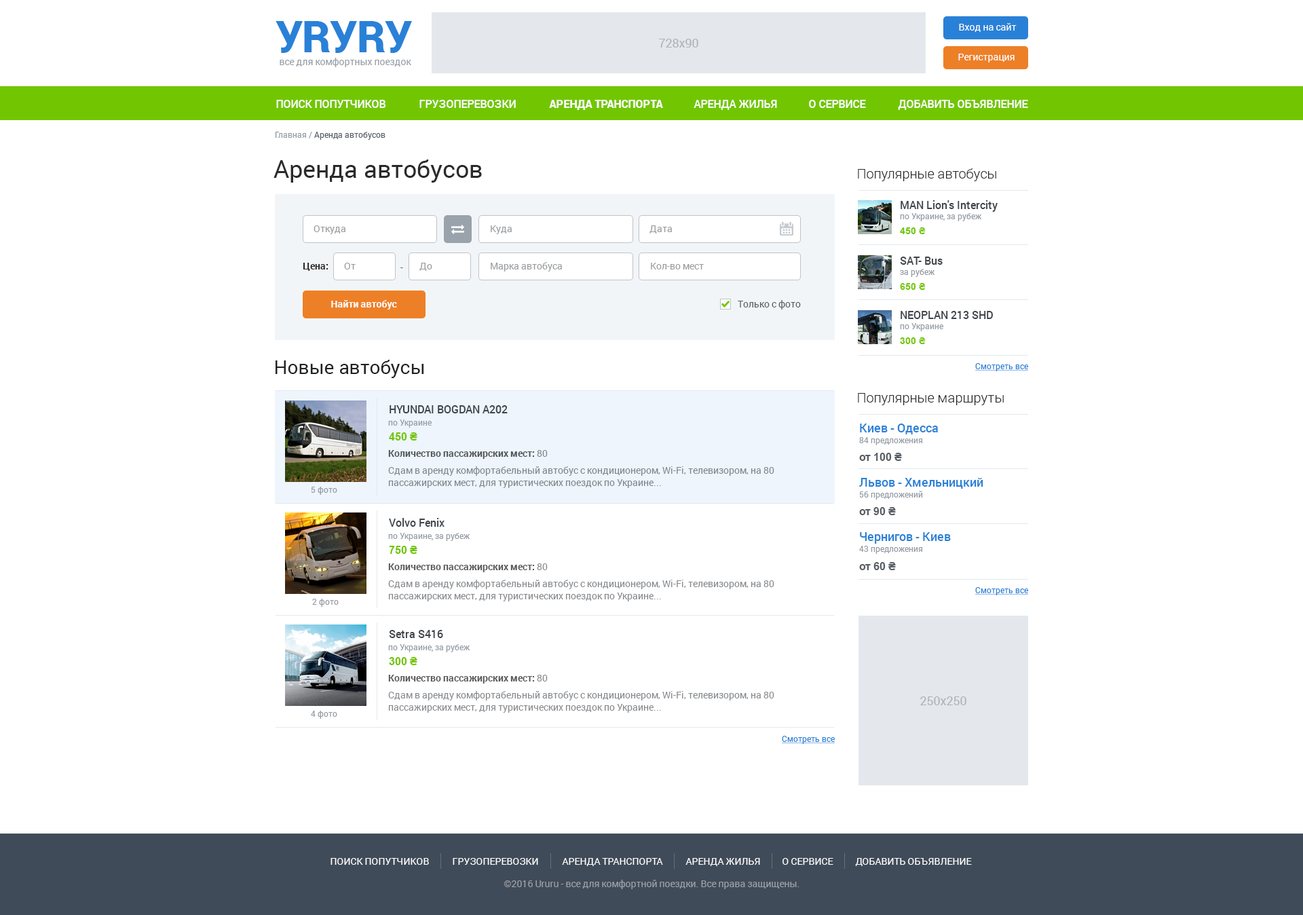
<style>
.page{position:relative;width:1303px;height:915px;background:#ffffff}
.page>*{position:absolute;margin:0}
.t1{font:43.4px "Roboto-Black";letter-spacing:-0.01em;color:#2981d7}
.t2{font:9.5px "Roboto-Regular";color:#ffffff}
.t3{font:12.2px "Roboto-Regular";color:#acb2b8}
.t4{font:9.5px "Roboto-Regular";color:#949ca5}
.t5{font:10.9px "Roboto-Medium";color:#ffffff;text-transform:uppercase}
.t6{font:10.9px "Roboto-Black";color:#ffffff;text-transform:uppercase}
.t7{font:8.1px "Roboto-Regular";color:#585e64}
.t8{font:8.1px "Roboto-Regular";color:#949ca5}
.t9{font:24.4px "Roboto-Regular";color:#2a2a2a}
.t10{font:13.6px "Roboto-Light";color:#2a2a2a}
.t11{font:10.9px "Roboto-Medium";color:#3f454b}
.t12{font:9.5px "Roboto-Regular";color:#989b9e}
.t13{font:9.5px "Arial-BoldMT";color:#72c601}
.t14{font:9.5px "Roboto-Bold";color:#2a2a2a}
.t15{font:9.5px "Roboto-Regular";color:#585e64}
.t16{font:9.5px "Roboto-Bold";color:#ffffff}
.t17{font:19px "Roboto-Regular";color:#202325}
.t18{font:8.1px "Roboto-Regular";color:#2981d7;text-decoration:underline}
.t19{font:12.2px "Roboto-Medium";color:#2981d7}
.t20{font:10.9px "Arial-BoldMT";color:#72c601}
.t21{font:9.5px "Roboto-Bold";color:#000000}
.t22{font:10.9px "Arial-BoldMT";color:#585e64}
.t23{font:9.5px/12.2px "Roboto-Regular";color:#80868c}
.t24{font:9.5px/12.2px "Roboto-Regular";color:#86898d}
.t25{font:9.5px "Roboto-Regular";color:#ffffff;text-transform:uppercase}
.t26{font:9.5px "Roboto-Regular";color:#9ca0a6}
</style>
<div class="page">
<p class="t1" style="left:276px;top:21px;width:136px;height:32px">УRУRУ</p>
<p class="t2" style="left:959px;top:23px;width:58px;height:9px">Вход на сайт</p>
<p class="t3" style="left:659px;top:39px;width:39px;height:9px">728x90</p>
<p class="t2" style="left:958px;top:54px;width:57px;height:8px">Регистрация</p>
<p class="t4" style="left:280px;top:58px;width:131px;height:9px">все для комфортных поездок</p>
<p class="t5" style="left:276px;top:100px;width:110px;height:8px">Поиск попутчиков</p>
<p class="t5" style="left:419px;top:100px;width:97px;height:8px">грузоперевозки</p>
<p class="t6" style="left:549px;top:100px;width:114px;height:10px">Аренда транспорта</p>
<p class="t5" style="left:694px;top:100px;width:83px;height:10px">Аренда жилья</p>
<p class="t5" style="left:809px;top:100px;width:57px;height:8px">о сервисе</p>
<p class="t5" style="left:898px;top:100px;width:130px;height:10px">добавить объявление</p>
<p class="t7" style="left:275px;top:132px;width:111px;height:8px"><span class="t8">Главная /</span> Аренда автобусов</p>
<p class="t9" style="left:274px;top:160px;width:208px;height:23px">Аренда автобусов</p>
<p class="t10" style="left:858px;top:168px;width:138px;height:13px">Популярные автобусы</p>
<p class="t11" style="left:901px;top:200px;width:97px;height:12px">MAN Lion's Intercity</p>
<p class="t8" style="left:900px;top:213px;width:82px;height:8px">по Украине, за рубеж</p>
<p class="t12" style="left:314px;top:225px;width:31px;height:9px">Откуда</p>
<p class="t12" style="left:491px;top:225px;width:21px;height:9px">Куда</p>
<p class="t12" style="left:650px;top:225px;width:22px;height:8px">Дата</p>
<p class="t13" style="left:900px;top:227px;width:26px;height:7px">450 ₴</p>
<p class="t11" style="left:900px;top:257px;width:43px;height:8px">SAT- Bus</p>
<p class="t14" style="left:303px;top:263px;width:26px;height:8px">Цена:</p>
<p class="t12" style="left:344px;top:263px;width:12px;height:6px">От</p>
<p class="t15" style="left:400px;top:267px;width:3px;height:1px">-</p>
<p class="t12" style="left:419px;top:263px;width:13px;height:8px">До</p>
<p class="t12" style="left:491px;top:262px;width:71px;height:10px">Марка автобуса</p>
<p class="t12" style="left:651px;top:263px;width:53px;height:6px">Кол-во мест</p>
<p class="t8" style="left:900px;top:269px;width:35px;height:8px">за рубеж</p>
<p class="t13" style="left:900px;top:283px;width:26px;height:7px">650 ₴</p>
<p class="t16" style="left:331px;top:300px;width:66px;height:10px">Найти автобус</p>
<p class="t15" style="left:738px;top:300px;width:63px;height:10px">Только с фото</p>
<p class="t11" style="left:901px;top:311px;width:92px;height:8px">NEOPLAN 213 SHD</p>
<p class="t8" style="left:900px;top:323px;width:43px;height:8px">по Украине</p>
<p class="t13" style="left:900px;top:337px;width:26px;height:7px">300 ₴</p>
<p class="t17" style="left:276px;top:360px;width:148px;height:18px">Новые автобусы</p>
<p class="t18" style="left:975px;top:363px;width:53px;height:8px">Смотреть все</p>
<p class="t10" style="left:858px;top:393px;width:146px;height:12px">Популярные маршруты</p>
<p class="t11" style="left:390px;top:405px;width:118px;height:8px">HYUNDAI BOGDAN A202</p>
<p class="t8" style="left:388px;top:419px;width:44px;height:9px">по Украине</p>
<p class="t19" style="left:860px;top:424px;width:78px;height:10px">Киев - Одесса</p>
<p class="t20" style="left:389px;top:432px;width:28px;height:9px">450 ₴</p>
<p class="t8" style="left:859px;top:437px;width:63px;height:8px">84 предложения</p>
<p class="t21" style="left:388px;top:450px;width:160px;height:9px;opacity:0.79">Количество пассажирских мест: <span class="t15">80</span></p>
<p class="t22" style="left:859px;top:453px;width:43px;height:8px">от 100 ₴</p>
<p class="t23" style="left:388px;top:466px;width:386px;height:22px">Сдам в аренду комфортабельный автобус с кондиционером, Wi-Fi, телевизором, на 80 пассажирских мест, для туристических поездок по Украине...</p>
<p class="t19" style="left:859px;top:478px;width:125px;height:11px">Львов - Хмельницкий</p>
<p class="t8" style="left:311px;top:487px;width:26px;height:8px">5 фото</p>
<p class="t8" style="left:859px;top:491px;width:64px;height:9px">56 предложений</p>
<p class="t22" style="left:859px;top:507px;width:37px;height:8px">от 90 ₴</p>
<p class="t11" style="left:389px;top:518px;width:56px;height:9px">Volvo Fenix</p>
<p class="t8" style="left:388px;top:533px;width:82px;height:8px">по Украине, за рубеж</p>
<p class="t19" style="left:860px;top:532px;width:91px;height:12px">Чернигов - Киев</p>
<p class="t20" style="left:389px;top:546px;width:28px;height:8px">750 ₴</p>
<p class="t8" style="left:859px;top:546px;width:63px;height:8px">43 предложения</p>
<p class="t21" style="left:388px;top:563px;width:160px;height:9px;opacity:0.79">Количество пассажирских мест: <span class="t15">80</span></p>
<p class="t22" style="left:859px;top:562px;width:37px;height:8px">от 60 ₴</p>
<p class="t24" style="left:388px;top:580px;width:386px;height:21px">Сдам в аренду комфортабельный автобус с кондиционером, Wi-Fi, телевизором, на 80 пассажирских мест, для туристических поездок по Украине...</p>
<p class="t18" style="left:975px;top:587px;width:53px;height:8px">Смотреть все</p>
<p class="t8" style="left:312px;top:599px;width:27px;height:8px">2 фото</p>
<p class="t11" style="left:389px;top:630px;width:54px;height:8px">Setra S416</p>
<p class="t8" style="left:388px;top:644px;width:82px;height:8px">по Украине, за рубеж</p>
<p class="t20" style="left:389px;top:657px;width:28px;height:8px">300 ₴</p>
<p class="t21" style="left:388px;top:675px;width:160px;height:9px;opacity:0.79">Количество пассажирских мест: <span class="t15">80</span></p>
<p class="t24" style="left:388px;top:691px;width:386px;height:22px">Сдам в аренду комфортабельный автобус с кондиционером, Wi-Fi, телевизором, на 80 пассажирских мест, для туристических поездок по Украине...</p>
<p class="t3" style="left:920px;top:696px;width:47px;height:9px">250х250</p>
<p class="t8" style="left:311px;top:711px;width:26px;height:8px">4 фото</p>
<p class="t18" style="left:782px;top:736px;width:53px;height:8px">Смотреть все</p>
<p class="t25" style="left:331px;top:858px;width:98px;height:7px">Поиск попутчиков</p>
<p class="t25" style="left:453px;top:858px;width:85px;height:7px">грузоперевозки</p>
<p class="t25" style="left:562px;top:858px;width:101px;height:8px">Аренда транспорта</p>
<p class="t25" style="left:686px;top:858px;width:74px;height:8px">Аренда жилья</p>
<p class="t25" style="left:783px;top:858px;width:51px;height:7px">о сервисе</p>
<p class="t25" style="left:855px;top:858px;width:117px;height:8px">добавить объявление</p>
<p class="t26" style="left:504px;top:880px;width:296px;height:9px">©2016 Ururu - все для комфортной поездки. Все права защищены.</p>
</div>
